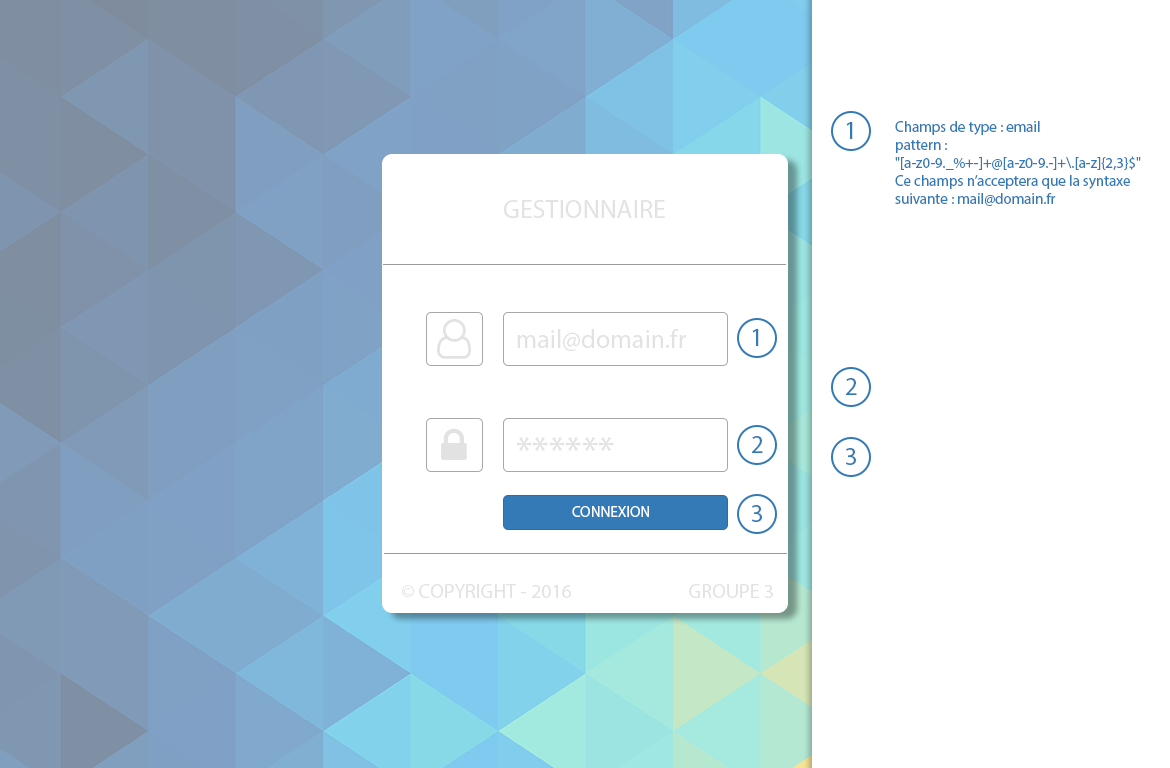
<style>
.page{position:relative;width:1170px;height:768px;background:#ffffff}
.page>*{position:absolute;margin:0}
.t1{font:25px "MyriadPro-Regular";color:#337ab7}
.t2{font:15px "MyriadPro-Regular";color:#337ab7}
.t3{font:26px "MyriadPro-Regular";color:#e2e2e2}
.t4{font:40px "MyriadPro-Regular";color:#e2e2e2}
.t5{font:15px "MyriadPro-Regular";color:#ffffff}
.t6{font:20px "MyriadPro-Regular";color:#e2e2e2}
</style>
<div class="page">
<p class="t1" style="left:846px;top:122px;width:7px;height:17px">1</p>
<p class="t2" style="left:895px;top:121px;width:246px;height:85px">Champs de type : email<br>pattern :<br>"[a-z0-9._%+-]+@[a-z0-9.-]+\.[a-z]{2,3}$"<br>Ce champs n’acceptera que la syntaxe suivante : mail@domain.fr</p>
<p class="t3" style="left:504px;top:200px;width:161px;height:18px">GESTIONNAIRE</p>
<p class="t3" style="left:517px;top:329px;width:169px;height:22px">mail@domain.fr</p>
<p class="t1" style="left:752px;top:329px;width:7px;height:17px">1</p>
<p class="t1" style="left:846px;top:378px;width:11px;height:17px">2</p>
<p class="t4" style="left:517px;top:437px;width:97px;height:14px">******</p>
<p class="t1" style="left:752px;top:436px;width:11px;height:17px">2</p>
<p class="t1" style="left:846px;top:448px;width:10px;height:17px">3</p>
<p class="t5" style="left:572px;top:506px;width:77px;height:11px">CONNEXION</p>
<p class="t1" style="left:752px;top:505px;width:10px;height:17px">3</p>
<p class="t6" style="left:402px;top:584px;width:169px;height:14px">© COPYRIGHT - 2016</p>
<p class="t6" style="left:689px;top:584px;width:84px;height:14px">GROUPE 3</p>
</div>
